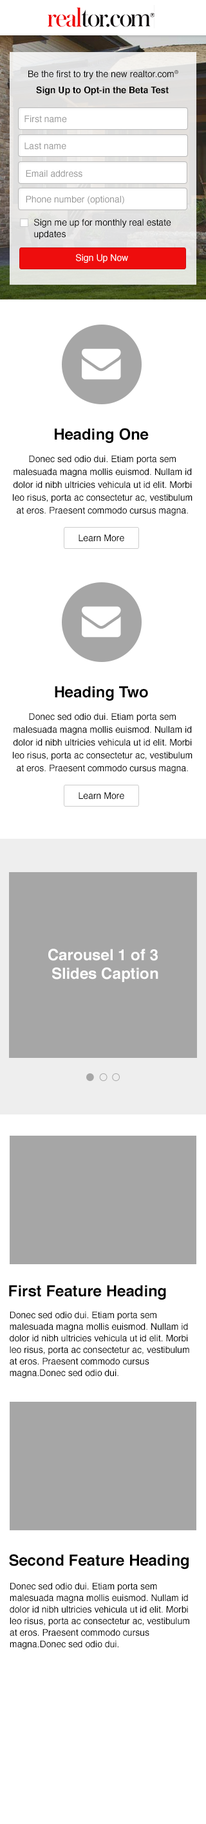
<style>
.page{position:relative;width:206px;height:1824px;background:#ffffff}
.page>*{position:absolute;margin:0}
.t1{font:9px "Helvetica";color:#000000}
.t2{font:9px "Helvetica-Bold";color:#000000}
.t3{font:9px "Helvetica";color:#999999}
.t4{font:9px/11.6px "Helvetica";color:#000000}
.t5{font:9px "Helvetica";color:#ffffff}
.t6{font:15.4px "Helvetica-Bold";color:#000000}
.t7{font:9px/12.9px "Helvetica";color:#000000}
.t8{font:15.4px "Helvetica-Bold";color:#ffffff}
</style>
<div class="page">
<p class="t1" style="left:28px;top:70px;width:150px;height:9px">Be the first to try the new realtor.com®</p>
<p class="t2" style="left:36px;top:86px;width:132px;height:9px">Sign Up to Opt-in the Beta Test</p>
<p class="t3" style="left:24px;top:115px;width:43px;height:8px">First name</p>
<p class="t3" style="left:24px;top:142px;width:42px;height:8px">Last name</p>
<p class="t3" style="left:26px;top:170px;width:56px;height:7px">Email address</p>
<p class="t3" style="left:26px;top:195px;width:98px;height:9px">Phone number (optional)</p>
<p class="t4" style="left:34px;top:219px;width:137px;height:20px">Sign me up for monthly real estate <br>updates</p>
<p class="t5" style="left:76px;top:254px;width:52px;height:9px">Sign Up Now</p>
<p class="t6" style="left:55px;top:428px;width:93px;height:16px">Heading One</p>
<p class="t7" style="left:13px;top:455px;width:179px;height:61px;text-align:center">Donec sed odio dui. Etiam porta sem malesuada magna mollis euismod. Nullam id dolor id nibh ultricies vehicula ut id elit. Morbi leo risus, porta ac consectetur ac, vestibulum at eros. Praesent commodo cursus magna.</p>
<p class="t1" style="left:78px;top:534px;width:46px;height:8px">Learn More</p>
<p class="t6" style="left:55px;top:686px;width:93px;height:15px">Heading Two</p>
<p class="t7" style="left:13px;top:713px;width:179px;height:60px;text-align:center">Donec sed odio dui. Etiam porta sem malesuada magna mollis euismod. Nullam id dolor id nibh ultricies vehicula ut id elit. Morbi leo risus, porta ac consectetur ac, vestibulum at eros. Praesent commodo cursus magna.</p>
<p class="t1" style="left:78px;top:792px;width:46px;height:8px">Learn More</p>
<p class="t8" style="left:48px;top:949px;width:110px;height:33px;text-align:center">Carousel 1 of 3 <br>Slides Caption</p>
<p class="t6" style="left:9px;top:1285px;width:157px;height:15px">First Feature Heading</p>
<p class="t4" style="left:10px;top:1311px;width:179px;height:67px">Donec sed odio dui. Etiam porta sem malesuada magna mollis euismod. Nullam id dolor id nibh ultricies vehicula ut id elit. Morbi leo risus, porta ac consectetur ac, vestibulum at eros. Praesent commodo cursus magna.Donec sed odio dui.</p>
<p class="t6" style="left:9px;top:1554px;width:179px;height:16px">Second Feature Heading</p>
<p class="t4" style="left:10px;top:1583px;width:179px;height:67px">Donec sed odio dui. Etiam porta sem malesuada magna mollis euismod. Nullam id dolor id nibh ultricies vehicula ut id elit. Morbi leo risus, porta ac consectetur ac, vestibulum at eros. Praesent commodo cursus magna.Donec sed odio dui.</p>
</div>
